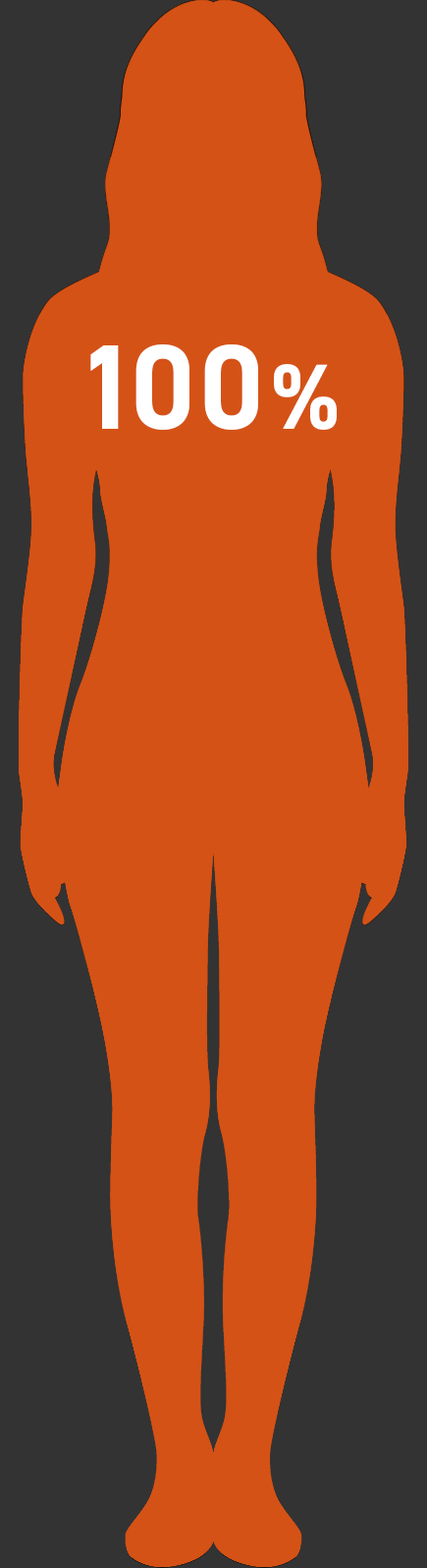
<style>
.page{position:relative;width:427px;height:1568px;background:#d45216}
.page>*{position:absolute;margin:0}
.t1{font:120.9px "DIN2014-Bold";letter-spacing:0.1em;color:#ffffff;scale:0.95 1}
.t2{font:93.1px "DIN2014-Bold";letter-spacing:0.1em;color:#ffffff;scale:0.95 1}
</style>
<div class="page">
<p class="t1" style="left:90px;top:344px;width:247px;height:86px">100<span class="t2">%</span></p>
</div>
